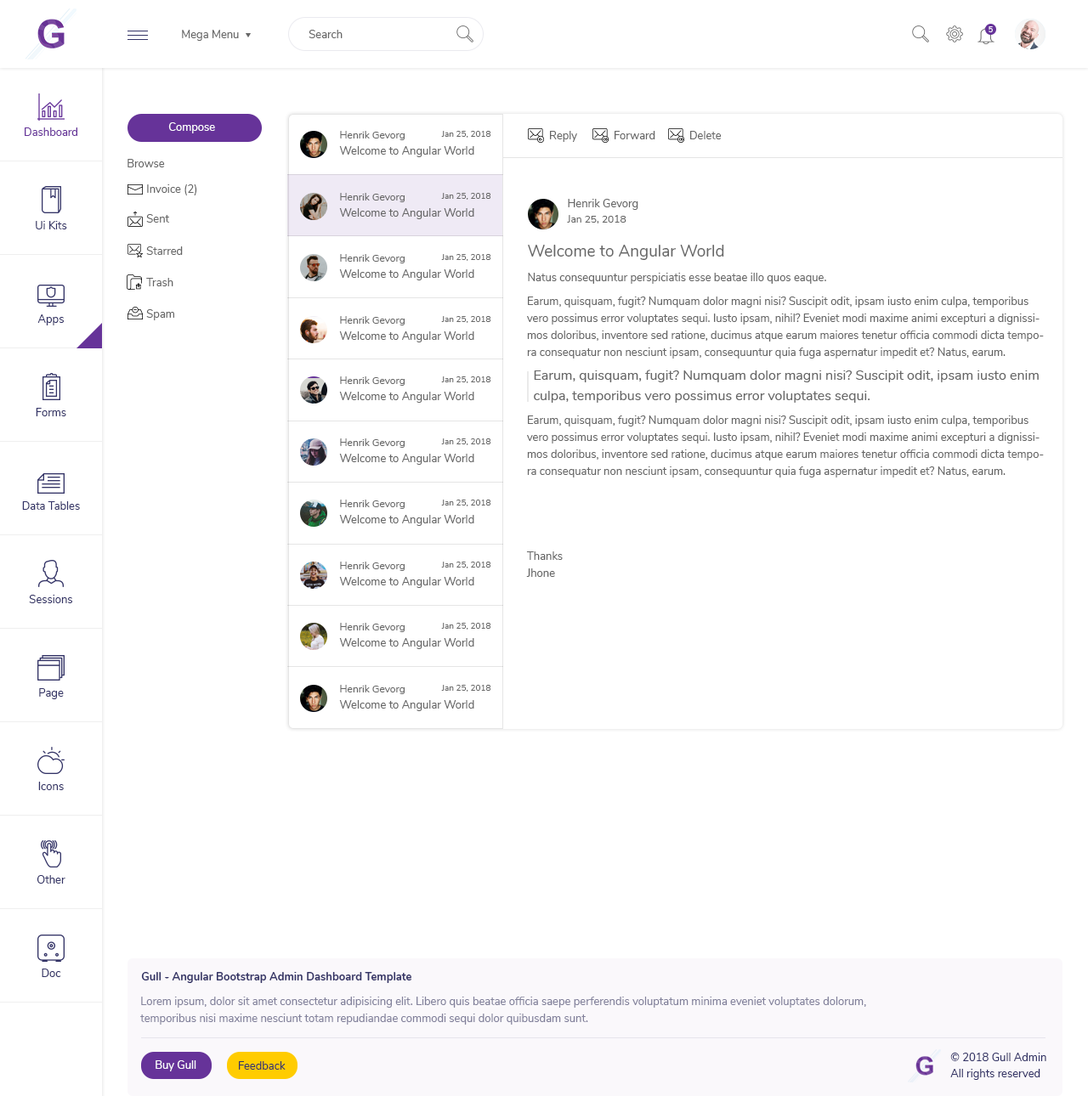
<style>
.page{position:relative;width:1088px;height:1096px;background:#ffffff}
.page>*{position:absolute;margin:0}
.t1{font:11px "Nunito-Regular";color:#666666}
.t2{font:7.6px "Nunito-SemiBold";color:#ffffff}
.t3{font:11px "Nunito-Regular";color:#ffffff}
.t4{font:11px "Nunito-Regular";color:#663399}
.t5{font:10.2px "Nunito-Regular";color:#666666}
.t6{font:8.5px "Nunito-Regular";color:#666666}
.t7{font:11px "Nunito-Regular";color:#333366}
.t8{font:16.1px "Nunito-Regular";color:#666666}
.t9{font:11px/17px "Nunito-Regular";color:#666666}
.t10{font:13.6px/20.4px "Nunito-Regular";color:#666666}
.t11{font:11px "Nunito-Bold";color:#333366}
.t12{font:11px/17px "Nunito-Regular";color:#82819b}
</style>
<div class="page">
<p class="t1" style="left:182px;top:30px;width:57px;height:11px">Mega Menu</p>
<p class="t1" style="left:308px;top:30px;width:34px;height:8px">Search</p>
<p class="t2" style="left:988px;top:26px;width:5px;height:6px">5</p>
<p class="t3" style="left:168px;top:122px;width:47px;height:11px">Compose</p>
<p class="t4" style="left:25px;top:127px;width:52px;height:9px">Dashboard</p>
<p class="t5" style="left:340px;top:131px;width:65px;height:9px">Henrik Gevorg</p>
<p class="t6" style="left:441px;top:131px;width:50px;height:7px">Jan 25, 2018</p>
<p class="t1" style="left:550px;top:131px;width:27px;height:11px">Reply</p>
<p class="t1" style="left:614px;top:131px;width:41px;height:8px">Forward</p>
<p class="t1" style="left:690px;top:131px;width:31px;height:8px">Delete</p>
<p class="t1" style="left:339px;top:146px;width:135px;height:11px">Welcome to Angular World</p>
<p class="t1" style="left:127px;top:159px;width:38px;height:8px">Browse</p>
<p class="t1" style="left:147px;top:184px;width:50px;height:11px">Invoice (2)</p>
<p class="t5" style="left:340px;top:193px;width:65px;height:9px">Henrik Gevorg</p>
<p class="t6" style="left:441px;top:193px;width:50px;height:7px">Jan 25, 2018</p>
<p class="t1" style="left:339px;top:208px;width:135px;height:11px">Welcome to Angular World</p>
<p class="t1" style="left:568px;top:199px;width:70px;height:11px">Henrik Gevorg</p>
<p class="t7" style="left:36px;top:221px;width:31px;height:8px">Ui Kits</p>
<p class="t1" style="left:146px;top:214px;width:23px;height:9px">Sent</p>
<p class="t5" style="left:567px;top:215px;width:59px;height:8px">Jan 25, 2018</p>
<p class="t8" style="left:528px;top:245px;width:196px;height:15px">Welcome to Angular World</p>
<p class="t1" style="left:146px;top:246px;width:37px;height:9px">Starred</p>
<p class="t5" style="left:340px;top:254px;width:65px;height:9px">Henrik Gevorg</p>
<p class="t6" style="left:441px;top:254px;width:50px;height:7px">Jan 25, 2018</p>
<p class="t1" style="left:339px;top:269px;width:135px;height:11px">Welcome to Angular World</p>
<p class="t1" style="left:146px;top:278px;width:27px;height:8px">Trash</p>
<p class="t1" style="left:528px;top:273px;width:298px;height:11px">Natus consequuntur perspiciatis esse beatae illo quos eaque.</p>
<p class="t9" style="left:526px;top:297px;width:518px;height:280px">Earum, quisquam, fugit? Numquam dolor magni nisi? Suscipit odit, ipsam iusto enim culpa, temporibus vero possimus error voluptates sequi. Iusto ipsam, nihil? Eveniet modi maxime animi excepturi a dignissimos doloribus, inventore sed ratione, ducimus atque earum maiores tenetur officia commodi dicta tempora consequatur non nesciunt ipsam, consequuntur quia fuga aspernatur impedit et? Natus, earum.<br><br><br><br>Earum, quisquam, fugit? Numquam dolor magni nisi? Suscipit odit, ipsam iusto enim culpa, temporibus vero possimus error voluptates sequi. Iusto ipsam, nihil? Eveniet modi maxime animi excepturi a dignissimos doloribus, inventore sed ratione, ducimus atque earum maiores tenetur officia commodi dicta tempora consequatur non nesciunt ipsam, consequuntur quia fuga aspernatur impedit et? Natus, earum.<br><br><br><br><br>Thanks<br>Jhone</p>
<p class="t7" style="left:37px;top:314px;width:27px;height:11px">Apps</p>
<p class="t1" style="left:146px;top:309px;width:28px;height:11px">Spam</p>
<p class="t5" style="left:340px;top:316px;width:65px;height:9px">Henrik Gevorg</p>
<p class="t6" style="left:441px;top:316px;width:50px;height:7px">Jan 25, 2018</p>
<p class="t1" style="left:339px;top:331px;width:135px;height:11px">Welcome to Angular World</p>
<p class="t5" style="left:340px;top:376px;width:65px;height:10px">Henrik Gevorg</p>
<p class="t6" style="left:441px;top:376px;width:50px;height:7px">Jan 25, 2018</p>
<p class="t10" style="left:534px;top:370px;width:504px;height:33px">Earum, quisquam, fugit? Numquam dolor magni nisi? Suscipit odit, ipsam iusto enim <br>culpa, temporibus vero possimus error voluptates sequi.</p>
<p class="t1" style="left:339px;top:392px;width:135px;height:11px">Welcome to Angular World</p>
<p class="t7" style="left:36px;top:408px;width:30px;height:8px">Forms</p>
<p class="t5" style="left:340px;top:438px;width:65px;height:10px">Henrik Gevorg</p>
<p class="t6" style="left:441px;top:438px;width:50px;height:7px">Jan 25, 2018</p>
<p class="t1" style="left:339px;top:454px;width:135px;height:11px">Welcome to Angular World</p>
<p class="t7" style="left:22px;top:501px;width:58px;height:9px">Data Tables</p>
<p class="t5" style="left:340px;top:500px;width:65px;height:9px">Henrik Gevorg</p>
<p class="t6" style="left:441px;top:500px;width:50px;height:6px">Jan 25, 2018</p>
<p class="t1" style="left:339px;top:515px;width:135px;height:11px">Welcome to Angular World</p>
<p class="t5" style="left:340px;top:562px;width:65px;height:9px">Henrik Gevorg</p>
<p class="t6" style="left:441px;top:562px;width:50px;height:7px">Jan 25, 2018</p>
<p class="t1" style="left:339px;top:577px;width:135px;height:11px">Welcome to Angular World</p>
<p class="t7" style="left:29px;top:595px;width:43px;height:8px">Sessions</p>
<p class="t5" style="left:340px;top:623px;width:65px;height:9px">Henrik Gevorg</p>
<p class="t6" style="left:441px;top:623px;width:50px;height:7px">Jan 25, 2018</p>
<p class="t1" style="left:339px;top:638px;width:135px;height:11px">Welcome to Angular World</p>
<p class="t7" style="left:39px;top:688px;width:25px;height:11px">Page</p>
<p class="t5" style="left:340px;top:685px;width:65px;height:9px">Henrik Gevorg</p>
<p class="t6" style="left:441px;top:685px;width:50px;height:7px">Jan 25, 2018</p>
<p class="t1" style="left:339px;top:700px;width:135px;height:11px">Welcome to Angular World</p>
<p class="t7" style="left:38px;top:782px;width:26px;height:8px">Icons</p>
<p class="t7" style="left:37px;top:875px;width:28px;height:9px">Other</p>
<p class="t7" style="left:42px;top:969px;width:19px;height:8px">Doc</p>
<p class="t11" style="left:141px;top:972px;width:270px;height:11px">Gull - Angular Bootstrap Admin Dashboard Template</p>
<p class="t12" style="left:140px;top:997px;width:726px;height:28px">Lorem ipsum, dolor sit amet consectetur adipisicing elit. Libero quis beatae officia saepe perferendis voluptatum minima eveniet voluptates dolorum, <br>temporibus nisi maxime nesciunt totam repudiandae commodi sequi dolor quibusdam sunt.</p>
<p class="t3" style="left:156px;top:1061px;width:40px;height:11px">Buy Gull</p>
<p class="t7" style="left:239px;top:1061px;width:47px;height:9px">Feedback</p>
<p class="t7" style="left:950px;top:1053px;width:96px;height:8px">© 2018 Gull Admin</p>
<p class="t7" style="left:950px;top:1069px;width:90px;height:11px">All rights reserved</p>
</div>
